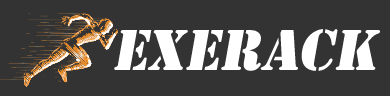
<style>
.page{position:relative;width:390px;height:96px;background:#333333}
.page>*{position:absolute;margin:0}
.t1{font:60px "Stencil";color:#ffffff;text-transform:uppercase;font-style:italic}
</style>
<div class="page">
<p class="t1" style="left:114px;top:29px;width:266px;height:42px">Exerack</p>
</div>
